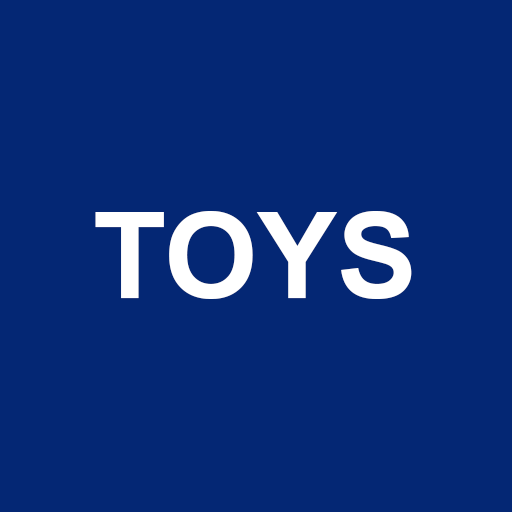
<style>
.page{position:relative;width:512px;height:512px;background:#042774}
.page>*{position:absolute;margin:0}
.t1{font:120px "Arial-BoldMT";color:#ffffff}
</style>
<div class="page">
<p class="t1" style="left:95px;top:211px;width:317px;height:88px">TOYS</p>
</div>
